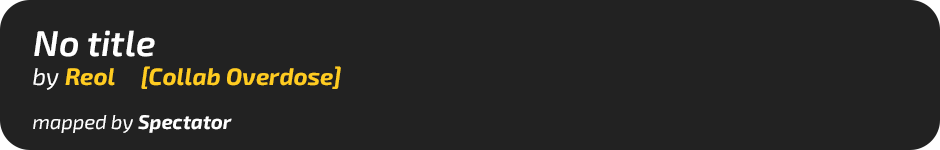
<style>
.page{position:relative;width:940px;height:150px;background:#222222}
.page>*{position:absolute;margin:0}
.t1{font:36px "Exo2.0-SemiBoldItalic";color:#ffffff}
.t2{font:20px "Exo2.0-Italic";color:#ffffff}
.t3{font:24px "Exo2.0-Italic";color:#ffffff}
.t4{font:24px "Exo2.0-BoldItalic";color:#ffcc21}
.t5{font:20px "Exo2.0-BoldItalic";color:#ffffff}
</style>
<div class="page">
<p class="t1" style="left:34px;top:30px;width:121px;height:27px">No title</p>
<p class="t2" style="left:33px;top:68px;width:100px;height:65px"><span class="t1"><br></span><span class="t3">by <br></span>mapped by</p>
<p class="t4" style="left:65px;top:66px;width:276px;height:23px">Reol     [Collab Overdose]</p>
<p class="t5" style="left:138px;top:115px;width:94px;height:18px">Spectator</p>
</div>
